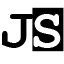
<style>
.page{position:relative;width:64px;height:64px;background:#ffffff}
.page>*{position:absolute;margin:0}
.t1{font:56.4px "CourierNewPS-BoldMT";color:#000000}
.t2{font:56.4px "CourierNewPS-BoldMT";color:#ffffff}
</style>
<div class="page">
<p class="t1" style="left:2px;top:14px;width:32px;height:34px">J</p>
<p class="t2" style="left:33px;top:14px;width:28px;height:34px">S</p>
</div>
